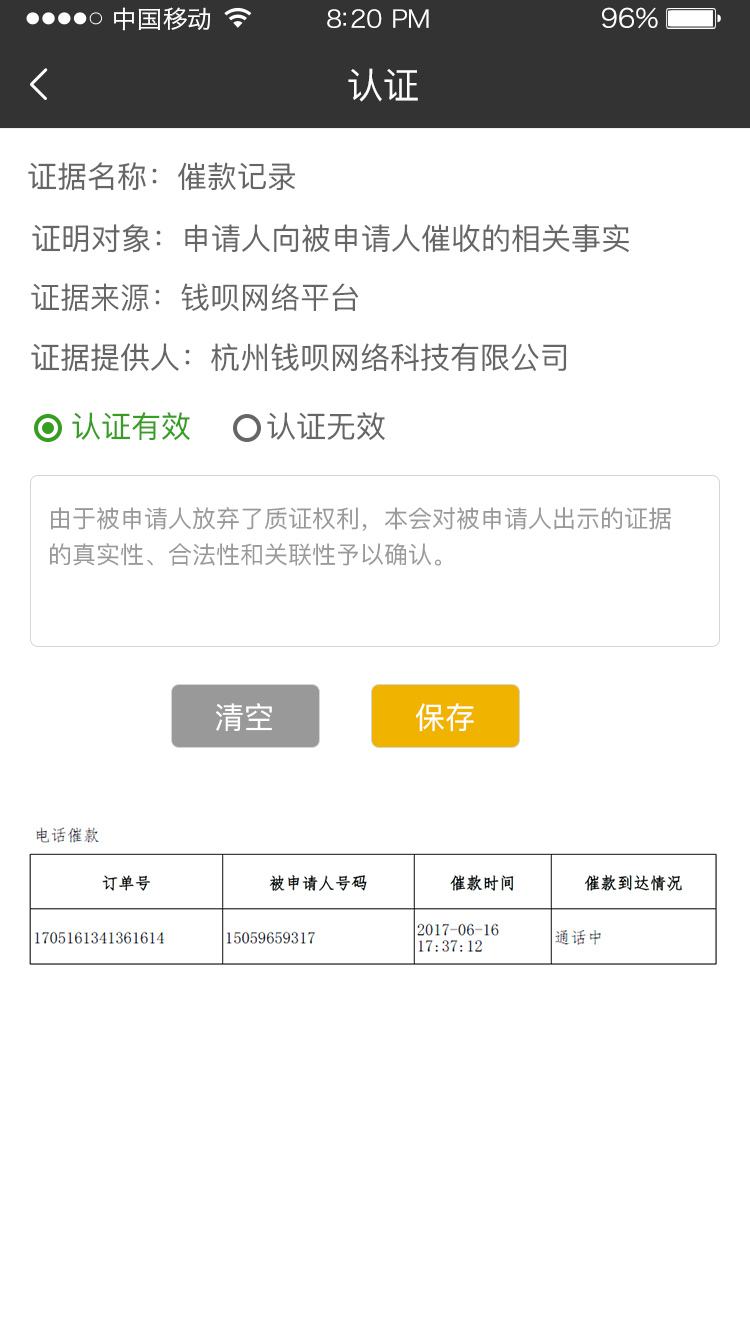
<style>
.page{position:relative;width:750px;height:1334px;background:#ffffff}
.page>*{position:absolute;margin:0}
.t1{font:24px "HiraginoSansGB-W3";letter-spacing:0.02em;color:#ffffff;scale:1.03 1}
.t2{font:24px "HiraginoSansGB-W3";letter-spacing:-0.02em;color:#ffffff;scale:1.03 1}
.t3{font:26.2px "HiraginoSansGB-W3";letter-spacing:-0.02em;color:#ffffff;scale:1.03 1}
.t4{font:36px "PingFangSC-Regular";letter-spacing:-0.02em;color:#ffffff}
.t5{font:30px "PingFangSC-Regular";color:#666666}
.t6{font:30px "PingFangSC-Regular";color:#379e23}
.t7{font:24px/36px "PingFangSC-Regular";color:#999999}
.t8{font:30px "PingFangSC-Regular";letter-spacing:-0.02em;color:#ffffff}
</style>
<div class="page">
<p class="t1" style="left:114px;top:7px;width:97px;height:24px">中国移动</p>
<p class="t2" style="left:327px;top:9px;width:102px;height:19px">8:20 PM</p>
<p class="t3" style="left:602px;top:7px;width:56px;height:22px">96%</p>
<p class="t4" style="left:348px;top:68px;width:70px;height:34px">认证</p>
<p class="t5" style="left:28px;top:162px;width:267px;height:29px">证据名称：催款记录</p>
<p class="t5" style="left:32px;top:224px;width:597px;height:29px">证明对象：申请人向被申请人催收的相关事实</p>
<p class="t5" style="left:31px;top:283px;width:328px;height:28px">证据来源：钱呗网络平台</p>
<p class="t5" style="left:31px;top:343px;width:536px;height:29px">证据提供人：杭州钱呗网络科技有限公司</p>
<p class="t6" style="left:72px;top:412px;width:118px;height:29px">认证有效</p>
<p class="t5" style="left:267px;top:412px;width:118px;height:28px">认证无效</p>
<p class="t7" style="left:50px;top:507px;width:621px;height:59px">由于被申请人放弃了质证权利，本会对被申请人出示的证据<br>的真实性、合法性和关联性予以确认。</p>
<p class="t8" style="left:215px;top:703px;width:57px;height:29px">清空</p>
<p class="t8" style="left:416px;top:703px;width:58px;height:29px">保存</p>
</div>
